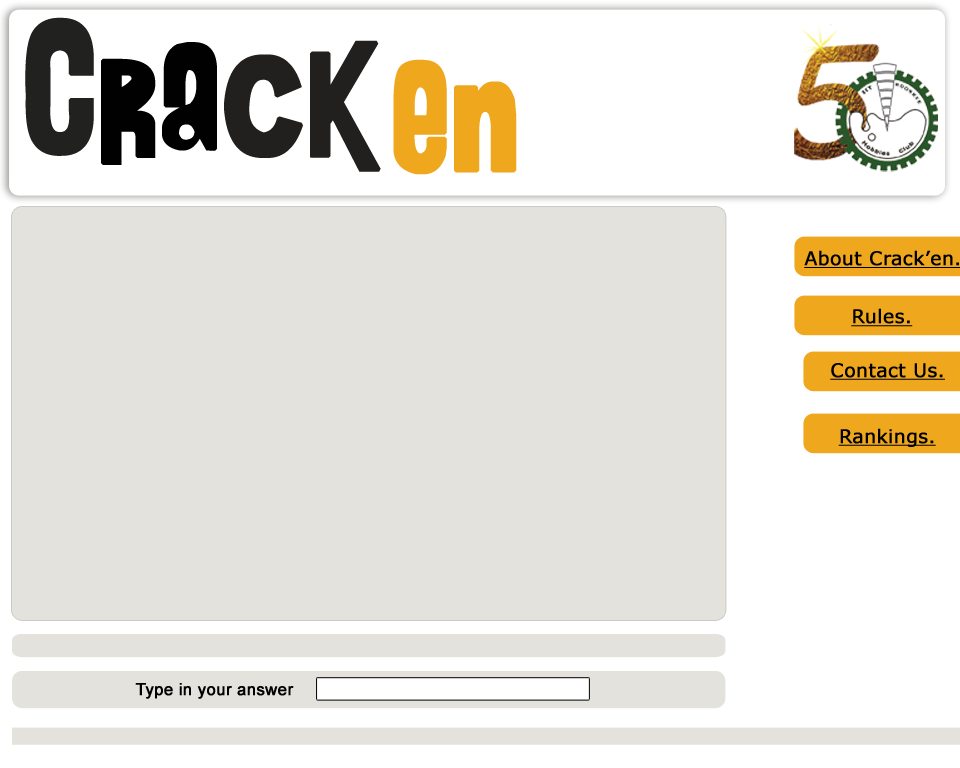
<style>
.page{position:relative;width:960px;height:768px;background:#e4e2dd}
.page>*{position:absolute;margin:0}
.t1{font:150px "AHDN";color:#010101;font-weight:bold}
.t2{font:150px "AHDN";color:#21221f;font-weight:bold}
.t3{font:150px "AHDN";color:#22201f;font-weight:bold}
.t4{font:150px "AHDN";color:#efa71d;font-weight:bold}
.t5{font:18.8px "Verdana";color:#000000;font-weight:bold;text-decoration:underline}
.t6{font:16.7px "ArialMT";color:#000000;font-weight:bold}
</style>
<div class="page">
<p class="t1" style="left:25px;top:17px;width:356px;height:155px"><span class="t2">C</span>ra<span class="t3">ck</span></p>
<p class="t4" style="left:393px;top:59px;width:124px;height:116px">en</p>
<p class="t5" style="left:804px;top:250px;width:158px;height:18px">About Crack’en.</p>
<p class="t5" style="left:851px;top:308px;width:62px;height:19px">Rules.</p>
<p class="t5" style="left:830px;top:363px;width:115px;height:17px">Contact Us.</p>
<p class="t5" style="left:838px;top:428px;width:98px;height:19px">Rankings.</p>
<p class="t6" style="left:135px;top:683px;width:159px;height:16px">Type in your answer</p>
</div>
